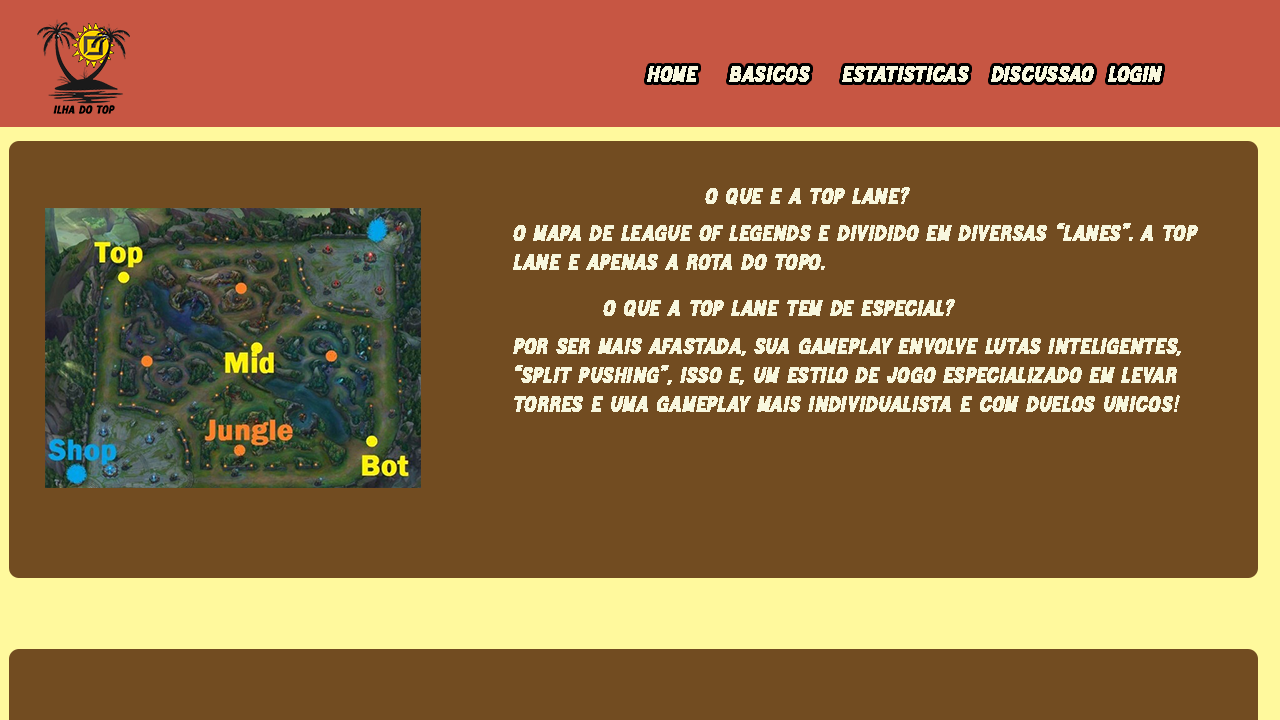
<style>
.page{position:relative;width:1280px;height:720px;background:#724c21}
.page>*{position:absolute;margin:0}
.t1{font:24px "HETIKADemoRegular";color:#f8f7de;font-weight:bold;font-style:italic}
.t2{font:24px "TimesNewRomanPSMT";color:#f8f7de;font-weight:bold;font-style:italic}
</style>
<div class="page">
<p class="t1" style="left:705px;top:187px;width:205px;height:18px">o que é a top lane?</p>
<p class="t1" style="left:513px;top:223px;width:685px;height:47px">o mapa de league of legends é dividido em diversas “lanes”. a top <br>lane e apenas a rota do topo.</p>
<p class="t1" style="left:603px;top:299px;width:352px;height:18px">o que a top lane tem de especial?</p>
<p class="t1" style="left:513px;top:338px;width:668px;height:74px">por ser mais afastada, sua gameplay envolve lutas inteligentes,<br>“split pushing”, isso é, um estilo de jogo especializado em levar<br>torres e uma gameplay mais individualista e com duelos unicos<span class="t2">!</span></p>
</div>
